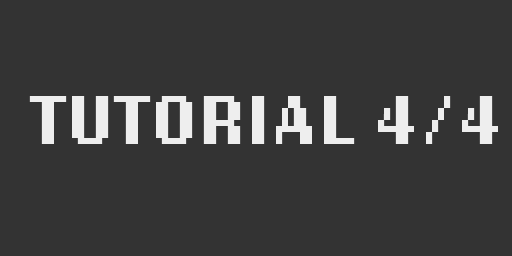
<style>
.page{position:relative;width:512px;height:256px;background:#333333}
.page>*{position:absolute;margin:0}
.t1{font:72px "LoRes12OT-Bold";color:#eeeeee}
</style>
<div class="page">
<p class="t1" style="left:29px;top:96px;width:469px;height:48px">TUTORIAL 4/4</p>
</div>
